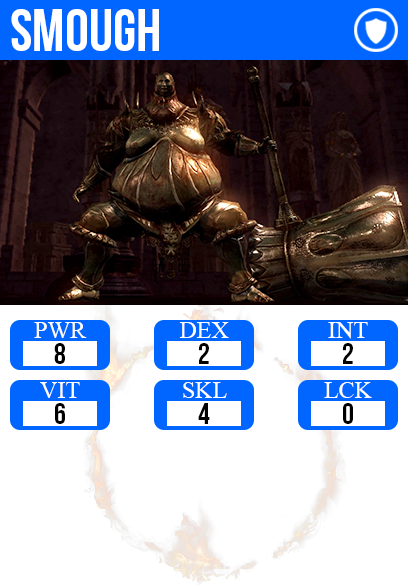
<style>
.page{position:relative;width:408px;height:585px;background:#ffffff}
.page>*{position:absolute;margin:0}
.t1{font:60px "BebasNeue";color:#ffffff}
.t2{font:24px "TimesNewRomanPSMT";color:#ffffff}
.t3{font:30px "BebasNeue";color:#000000}
</style>
<div class="page">
<p class="t1" style="left:11px;top:9px;width:148px;height:42px">smough</p>
<p class="t2" style="left:34px;top:322px;width:53px;height:16px">PWR</p>
<p class="t2" style="left:179px;top:322px;width:50px;height:16px">DEX</p>
<p class="t2" style="left:328px;top:322px;width:40px;height:17px">INT</p>
<p class="t3" style="left:54px;top:343px;width:11px;height:21px">8</p>
<p class="t3" style="left:199px;top:343px;width:10px;height:21px">2</p>
<p class="t3" style="left:343px;top:343px;width:10px;height:21px">2</p>
<p class="t2" style="left:40px;top:382px;width:40px;height:16px">VIT</p>
<p class="t2" style="left:183px;top:382px;width:44px;height:16px">SKL</p>
<p class="t2" style="left:324px;top:382px;width:48px;height:16px">LCK</p>
<p class="t3" style="left:55px;top:403px;width:10px;height:21px">6</p>
<p class="t3" style="left:198px;top:403px;width:12px;height:21px">4</p>
<p class="t3" style="left:343px;top:403px;width:10px;height:21px">0</p>
</div>
